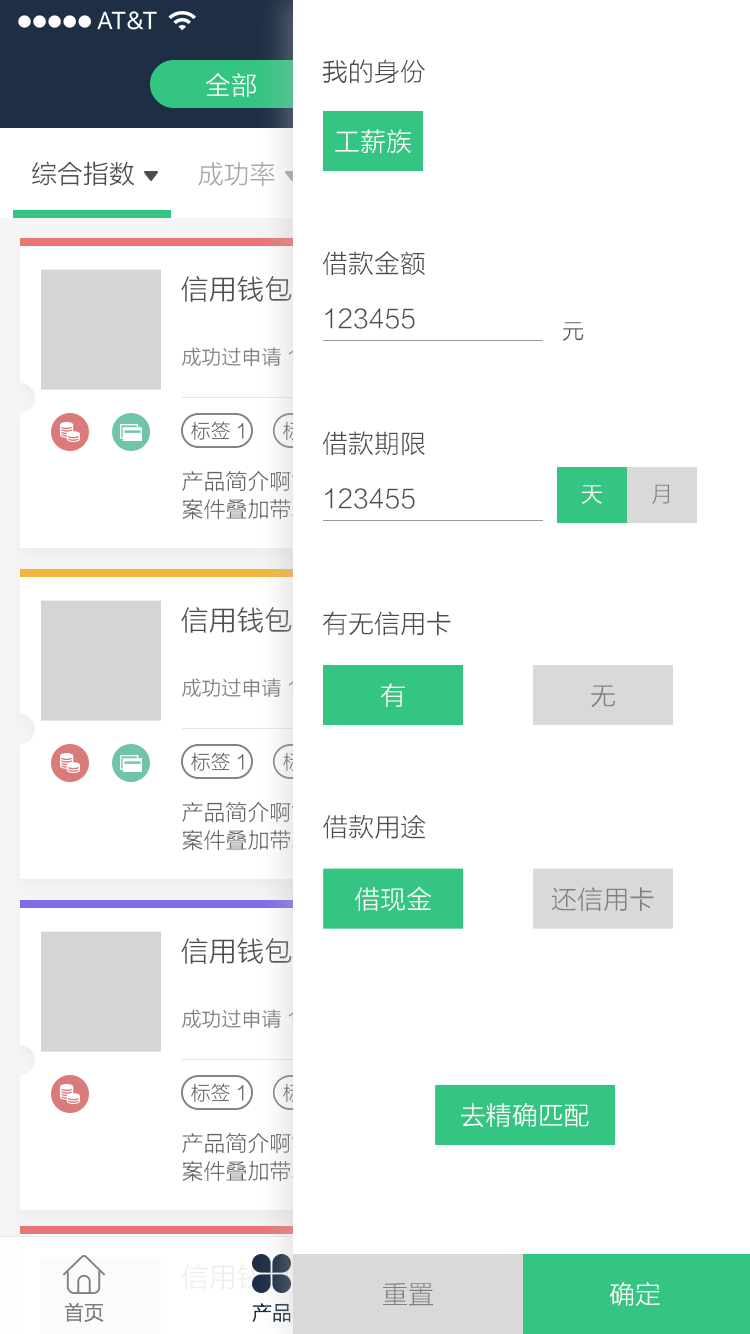
<style>
.page{position:relative;width:750px;height:1334px;background:#ffffff}
.page>*{position:absolute;margin:0}
.t1{font:26px "FZLTXHK";color:#4d4d4d}
.t2{font:26px "FZLTXHK";color:#ffffff}
.t3{font:26px "FZLTXHK";color:#a6a6a6}
.t4{font:28px "FZLTXHK";color:#4d4d4d}
.t5{font:22px "FZLTXHK";color:#4d4d4d}
.t6{font:20px "FZLTXHK";color:#808080}
.t7{font:20px "FZLTXHK";color:#666666}
.t8{font:22px "FZLTXHK";color:#ffffff}
.t9{font:22px "FZLTXHK";color:#808080}
.t10{font:26px "FZLTXHK";color:#808080}
.t11{font:22px/28px "FZLTXHK"}
.t12{font:20px "FZLTXHK";color:#303e52}
</style>
<div class="page">
<p class="t1" style="left:322px;top:59px;width:103px;height:24px">我的身份</p>
<p class="t2" style="left:206px;top:73px;width:50px;height:24px">全部</p>
<p class="t2" style="left:335px;top:129px;width:76px;height:25px">工薪族</p>
<p class="t1" style="left:32px;top:161px;width:102px;height:25px">综合指数</p>
<p class="t3" style="left:198px;top:161px;width:77px;height:26px">成功率</p>
<p class="t1" style="left:322px;top:251px;width:103px;height:25px">借款金额</p>
<p class="t4" style="left:181px;top:276px;width:111px;height:26px">信用钱包</p>
<p class="t1" style="left:325px;top:308px;width:90px;height:21px">123455</p>
<p class="t5" style="left:563px;top:322px;width:21px;height:19px">元</p>
<p class="t6" style="left:182px;top:347px;width:178px;height:20px">成功过申请1234次</p>
<p class="t7" style="left:191px;top:421px;width:53px;height:19px">标签1</p>
<p class="t1" style="left:322px;top:431px;width:103px;height:25px">借款期限</p>
<p class="t8" style="left:582px;top:485px;width:20px;height:19px">天</p>
<p class="t9" style="left:652px;top:484px;width:17px;height:20px">月</p>
<p class="t1" style="left:325px;top:488px;width:90px;height:21px">123455</p>
<p class="t4" style="left:181px;top:607px;width:111px;height:26px">信用钱包</p>
<p class="t1" style="left:323px;top:611px;width:128px;height:25px">有无信用卡</p>
<p class="t6" style="left:182px;top:678px;width:178px;height:20px">成功过申请1234次</p>
<p class="t2" style="left:381px;top:683px;width:24px;height:24px">有</p>
<p class="t10" style="left:591px;top:685px;width:24px;height:22px">无</p>
<p class="t7" style="left:191px;top:752px;width:53px;height:19px">标签1</p>
<p class="t11" style="left:182px;top:802px;width:504px;height:49px">产品简介啊简介啊简介啊简介极大接纳的额骄傲得加<br>案件叠加带耳朵进</p>
<p class="t1" style="left:323px;top:815px;width:103px;height:24px">借款用途</p>
<p class="t2" style="left:355px;top:887px;width:76px;height:24px">借现金</p>
<p class="t10" style="left:552px;top:887px;width:102px;height:24px">还信用卡</p>
<p class="t4" style="left:181px;top:938px;width:111px;height:26px">信用钱包</p>
<p class="t6" style="left:182px;top:1009px;width:178px;height:20px">成功过申请1234次</p>
<p class="t7" style="left:191px;top:1083px;width:53px;height:19px">标签1</p>
<p class="t2" style="left:461px;top:1103px;width:128px;height:24px">去精确匹配</p>
<p class="t11" style="left:182px;top:1133px;width:504px;height:49px">产品简介啊简介啊简介啊简介极大接纳的额骄傲得加<br>案件叠加带耳朵进</p>
<p class="t10" style="left:383px;top:1283px;width:50px;height:23px">重置</p>
<p class="t2" style="left:609px;top:1282px;width:51px;height:24px">确定</p>
<p class="t6" style="left:64px;top:1302px;width:40px;height:20px">首页</p>
<p class="t12" style="left:252px;top:1303px;width:39px;height:19px">产品</p>
</div>
